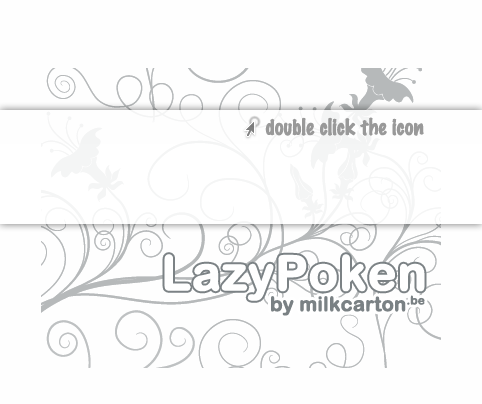
<style>
.page{position:relative;width:482px;height:404px;background:#fefefe}
.page>*{position:absolute;margin:0}
.t1{font:20px "MarkerFelt-Thin";color:#999999;font-weight:bold}
.t2{font:48px "ArialRoundedMTBold";color:#ffffff;font-weight:bold}
.t3{font:20px "ArialRoundedMTBold";letter-spacing:-0.01em;color:#7a8184;font-weight:bold}
</style>
<div class="page">
<p class="t1" style="left:265px;top:117px;width:159px;height:19px">double click the icon</p>
<p class="t2" style="left:164px;top:254px;width:261px;height:47px">LazyPoken</p>
<p class="t3" style="left:271px;top:295px;width:154px;height:21px">by milkcarton.be</p>
</div>
